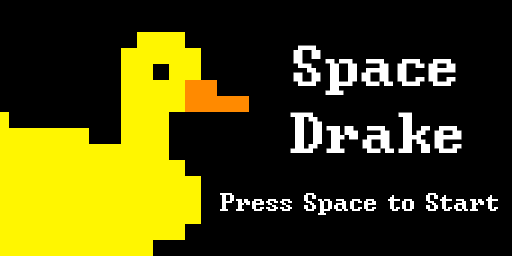
<style>
.page{position:relative;width:512px;height:256px;background:#000000}
.page>*{position:absolute;margin:0}
.t1{font:72px "DwarfFortressVan";color:#ffffff}
.t2{font:32px "DwarfFortressVan";color:#ffffff}
</style>
<div class="page">
<p class="t1" style="left:293px;top:45px;width:163px;height:50px">Space</p>
<p class="t1" style="left:290px;top:112px;width:172px;height:41px">Drake</p>
<p class="t2" style="left:220px;top:193px;width:278px;height:22px">Press Space to Start</p>
</div>
